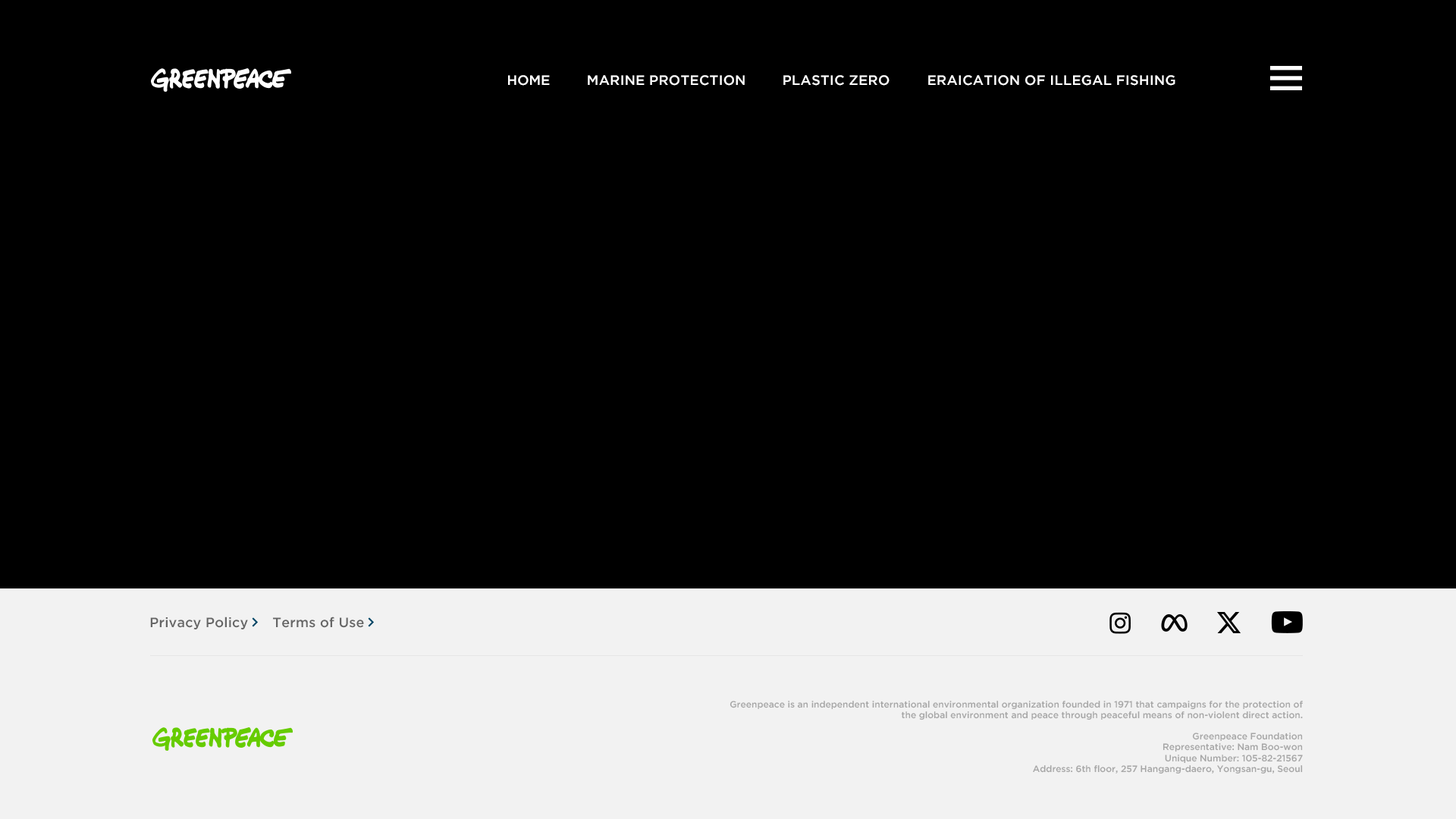
<style>
.page{position:relative;width:1456px;height:819px;background:#000000}
.page>*{position:absolute;margin:0}
.t1{font:13.6px "GothamPro-Medium";color:#ffffff}
.t2{font:13.6px "GothamPro-Medium";color:#ffffff;text-transform:uppercase}
.t3{font:13.6px "GothamPro-Medium";letter-spacing:0.01em;color:#666666}
.t4{font:9.1px "GothamPro-Medium";color:#a6a6a6}
</style>
<div class="page">
<p class="t1" style="left:508px;top:75px;width:42px;height:11px">HOME</p>
<p class="t2" style="left:588px;top:75px;width:157px;height:11px">Marine protection</p>
<p class="t2" style="left:783px;top:75px;width:107px;height:11px">Plastic Zero</p>
<p class="t2" style="left:928px;top:75px;width:247px;height:11px">Eraication of illegal fishing</p>
<p class="t3" style="left:150px;top:617px;width:98px;height:12px">Privacy Policy</p>
<p class="t3" style="left:273px;top:617px;width:91px;height:11px">Terms of Use</p>
<p class="t4" style="left:730px;top:701px;width:573px;height:19px;text-align:right">Greenpeace is an independent international environmental organization founded in 1971 that campaigns for the protection of the global environment and peace through peaceful means of non-violent direct action.</p>
<p class="t4" style="left:1033px;top:733px;width:270px;height:41px;text-align:right">Greenpeace Foundation<br>Representative: Nam Boo-won<br>Unique Number: 105-82-21567<br>Address: 6th floor, 257 Hangang-daero, Yongsan-gu, Seoul</p>
</div>
